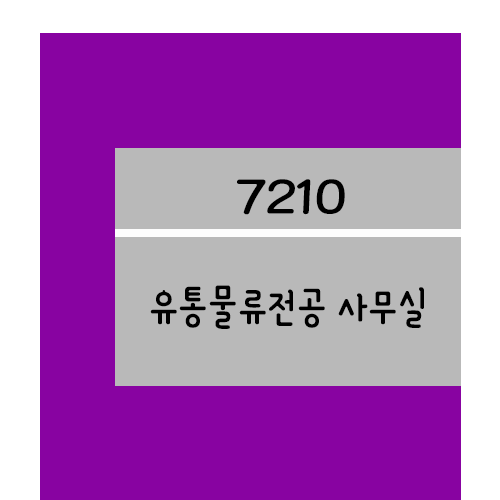
<style>
.page{position:relative;width:500px;height:500px;background:#8803a1}
.page>*{position:absolute;margin:0}
.t1{font:61.2px "YanoljaYacheR";color:#000000;scale:1.18 1}
.t2{font:48px "YanoljaYacheR";color:#000000}
</style>
<div class="page">
<p class="t1" style="left:237px;top:179px;width:108px;height:36px">7210</p>
<p class="t2" style="left:150px;top:285px;width:274px;height:44px">유통물류전공 사무실</p>
</div>
